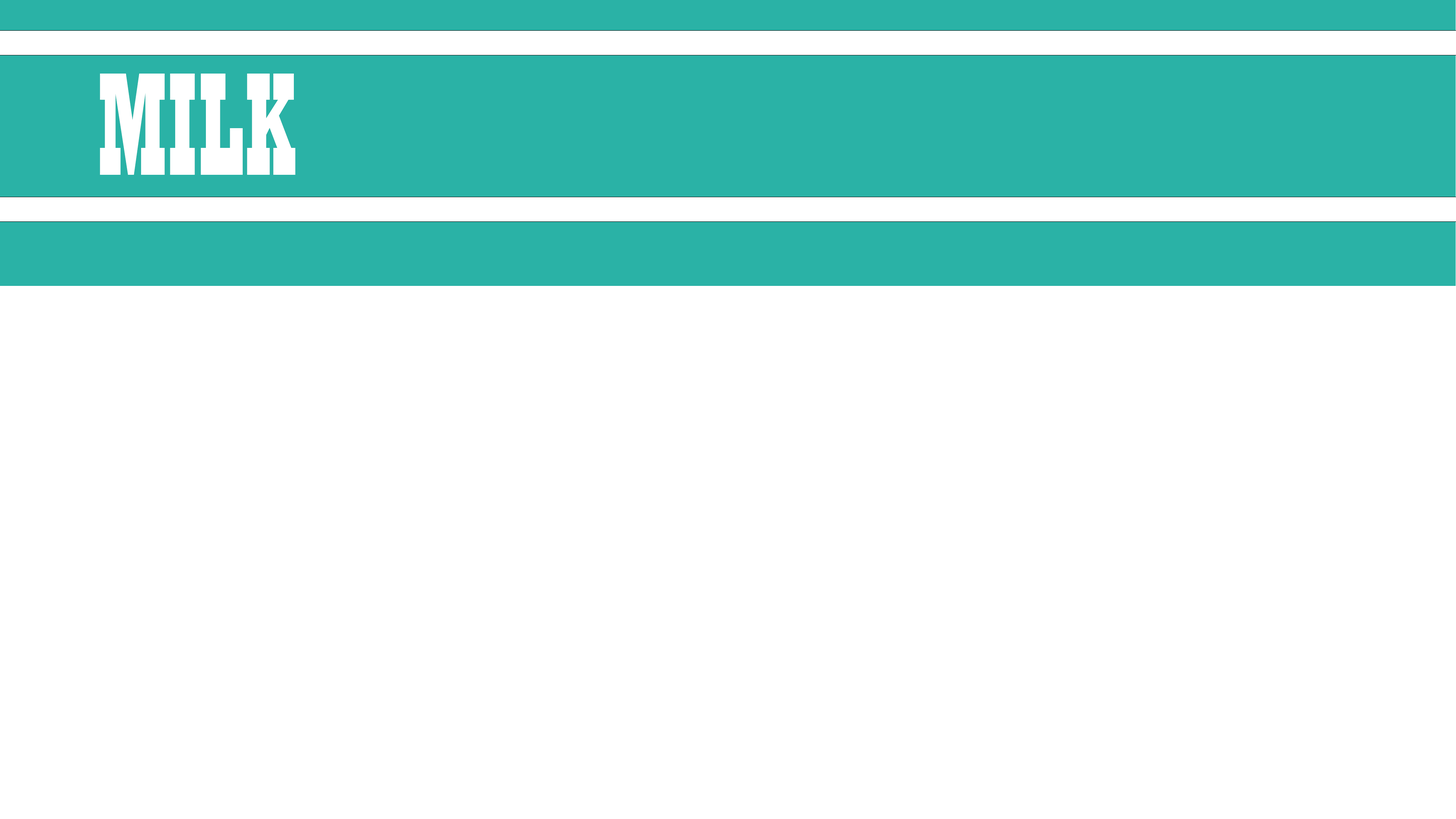
<style>
.page{position:relative;width:1456px;height:819px;background:#ffffff}
.page>*{position:absolute;margin:0}
.t1{font:151.7px "Playbill";color:#ffffff}
</style>
<div class="page">
<p class="t1" style="left:100px;top:74px;width:195px;height:101px">MILK</p>
</div>
